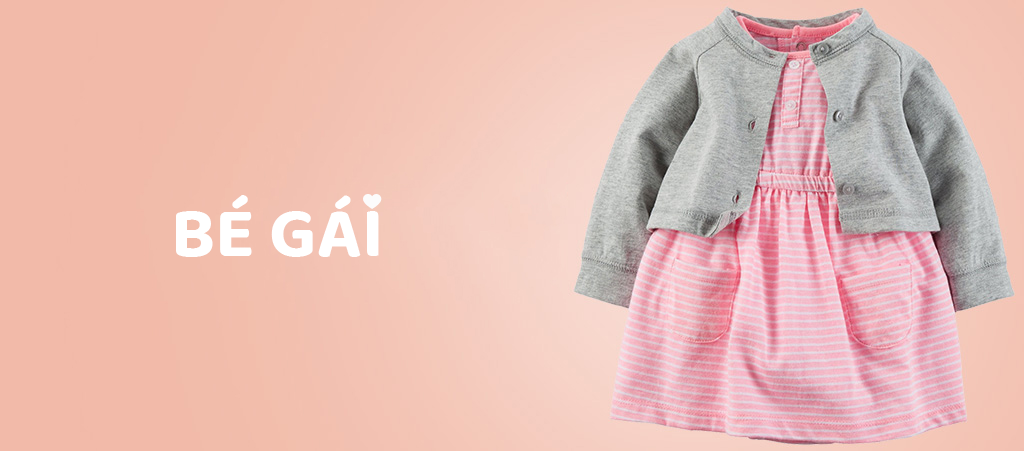
<style>
.page{position:relative;width:1024px;height:451px}
.page>*{position:absolute;margin:0}
.t1{font:72px "BalooTammudu2-Bold";color:#ffffff}
</style>
<div class="page">
<p class="t1" style="left:176px;top:195px;width:203px;height:62px">BÉ GÁI</p>
</div>
